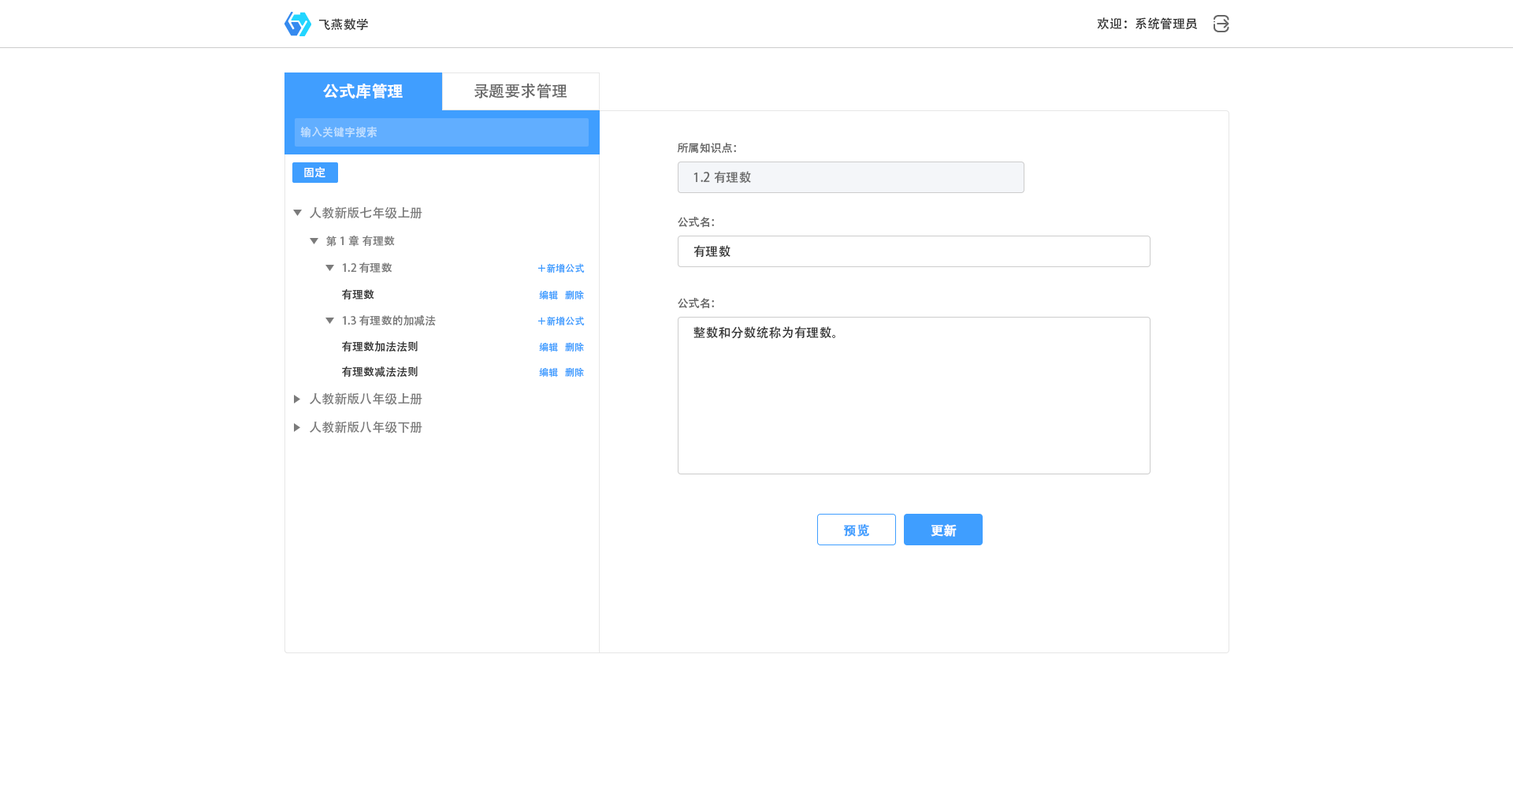
<style>
.page{position:relative;width:1513px;height:788px;background:#ffffff}
.page>*{position:absolute;margin:0}
.t1{font:12.6px "AdobeHeitiStd-Regular";color:#333333}
.t2{font:15.8px "AdobeHeitiStd-Regular";color:#ffffff;font-weight:bold}
.t3{font:15.8px "AdobeHeitiStd-Regular";color:#666666}
.t4{font:11px "AdobeHeitiStd-Regular";color:#c3e0ff}
.t5{font:11px "AdobeHeitiStd-Regular";color:#666666}
.t6{font:11px "AdobeHeitiStd-Regular";color:#ffffff}
.t7{font:12.6px "AdobeHeitiStd-Regular";color:#666666}
.t8{font:12.6px "AdobeHeitiStd-Regular";color:#7b7b7b}
.t9{font:11px "AdobeHeitiStd-Regular";color:#7b7b7b}
.t10{font:9.5px "AdobeHeitiStd-Regular";color:#409eff}
.t11{font:11px "AdobeHeitiStd-Regular";color:#333333}
.t12{font:12.6px "AdobeHeitiStd-Regular";color:#409eff;font-weight:bold}
.t13{font:12.6px "AdobeHeitiStd-Regular";color:#ffffff;font-weight:bold}
</style>
<div class="page">
<p class="t1" style="left:1097px;top:17px;width:101px;height:13px">欢迎：系统管理员</p>
<p class="t1" style="left:318px;top:18px;width:50px;height:13px">飞燕数学</p>
<p class="t2" style="left:323px;top:84px;width:80px;height:15px">公式库管理</p>
<p class="t3" style="left:474px;top:83px;width:93px;height:16px">录题要求管理</p>
<p class="t4" style="left:300px;top:126px;width:77px;height:12px">输入关键字搜索</p>
<p class="t5" style="left:677px;top:143px;width:59px;height:11px">所属知识点：</p>
<p class="t6" style="left:304px;top:166px;width:21px;height:11px">固定</p>
<p class="t7" style="left:694px;top:171px;width:57px;height:13px">1.2有理数</p>
<p class="t8" style="left:310px;top:206px;width:112px;height:13px">人教新版七年级上册</p>
<p class="t5" style="left:678px;top:217px;width:36px;height:11px">公式名：</p>
<p class="t9" style="left:326px;top:235px;width:69px;height:12px">第1章 有理数</p>
<p class="t1" style="left:694px;top:245px;width:37px;height:13px">有理数</p>
<p class="t9" style="left:342px;top:262px;width:50px;height:11px">1.2 有理数</p>
<p class="t10" style="left:537px;top:263px;width:48px;height:10px">＋新增公式</p>
<p class="t11" style="left:342px;top:289px;width:32px;height:11px">有理数</p>
<p class="t10" style="left:539px;top:290px;width:19px;height:10px">编辑</p>
<p class="t10" style="left:565px;top:290px;width:19px;height:9px">删除</p>
<p class="t5" style="left:678px;top:298px;width:36px;height:11px">公式名：</p>
<p class="t9" style="left:342px;top:315px;width:94px;height:11px">1.3 有理数的加减法</p>
<p class="t10" style="left:537px;top:316px;width:48px;height:10px">＋新增公式</p>
<p class="t1" style="left:694px;top:326px;width:141px;height:13px">整数和分数统称为有理数。</p>
<p class="t11" style="left:342px;top:341px;width:76px;height:11px">有理数加法法则</p>
<p class="t10" style="left:539px;top:342px;width:19px;height:10px">编辑</p>
<p class="t10" style="left:565px;top:342px;width:19px;height:9px">删除</p>
<p class="t11" style="left:342px;top:366px;width:76px;height:11px">有理数减法法则</p>
<p class="t10" style="left:539px;top:367px;width:19px;height:10px">编辑</p>
<p class="t10" style="left:565px;top:367px;width:19px;height:10px">删除</p>
<p class="t8" style="left:310px;top:392px;width:112px;height:13px">人教新版八年级上册</p>
<p class="t8" style="left:310px;top:421px;width:112px;height:12px">人教新版八年级下册</p>
<p class="t12" style="left:844px;top:524px;width:25px;height:13px">预览</p>
<p class="t13" style="left:931px;top:524px;width:26px;height:13px">更新</p>
</div>
